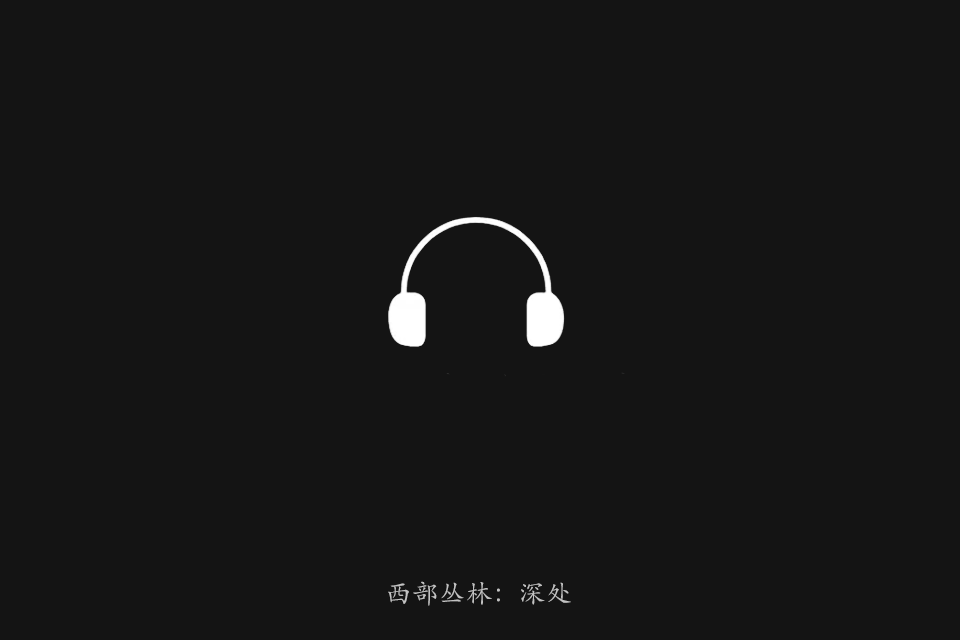
<style>
.page{position:relative;width:960px;height:640px;background:#141414}
.page>*{position:absolute;margin:0}
.t1{font:26.7px "STKaiti";color:#c2c2c2}
</style>
<div class="page">
<p class="t1" style="left:388px;top:581px;width:183px;height:25px">西部丛林：深处</p>
</div>
